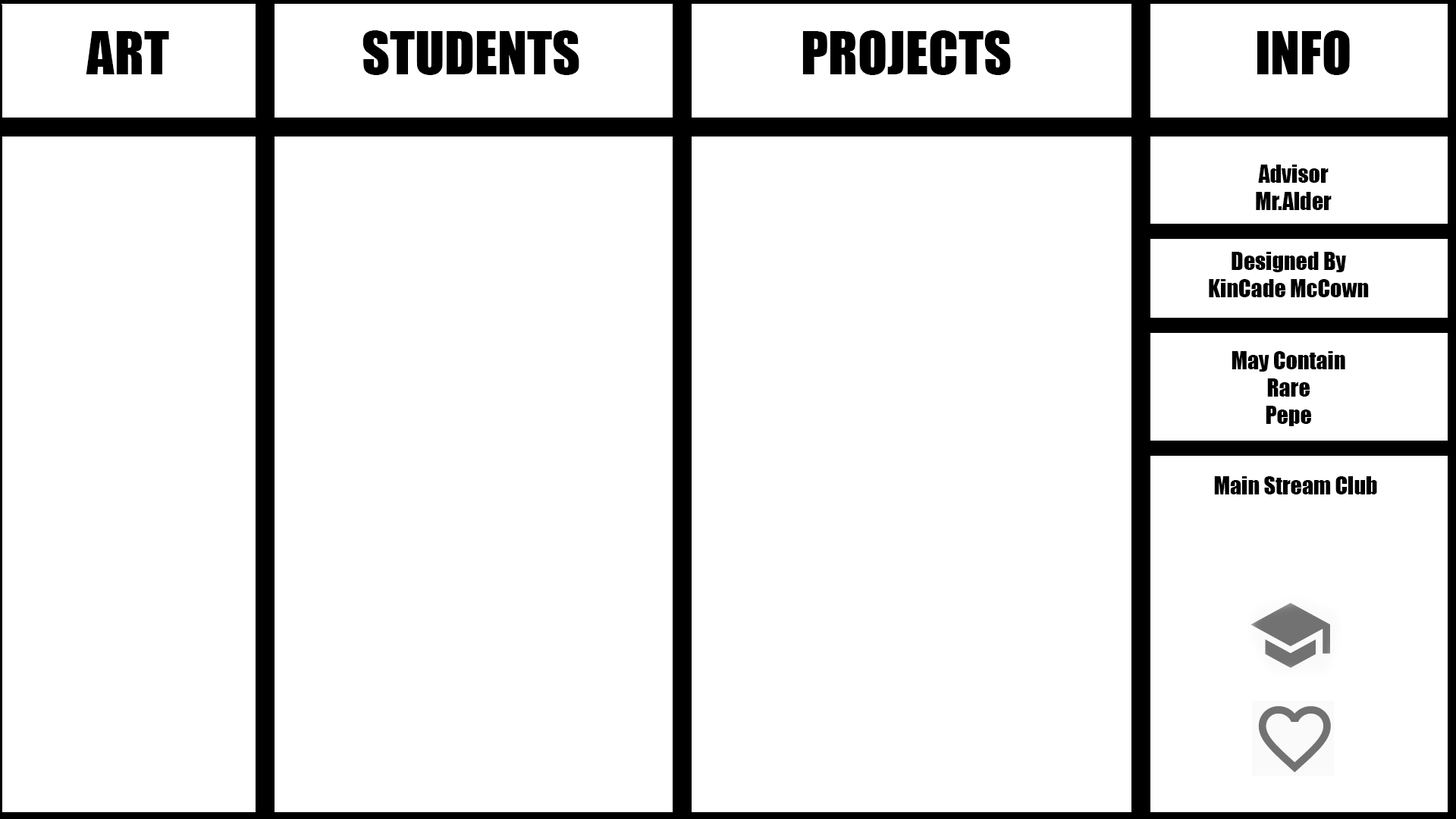
<style>
.page{position:relative;width:1456px;height:819px;background:#ffffff}
.page>*{position:absolute;margin:0}
.t1{font:54.6px "Impact";color:#000000}
.t2{font:22.7px "Impact";color:#000000}
</style>
<div class="page">
<p class="t1" style="left:86px;top:31px;width:83px;height:43px">ART</p>
<p class="t1" style="left:362px;top:30px;width:217px;height:45px">STUDENTS</p>
<p class="t1" style="left:802px;top:30px;width:209px;height:45px">PROJECTS</p>
<p class="t1" style="left:1257px;top:30px;width:93px;height:45px">INFO</p>
<p class="t2" style="left:1256px;top:165px;width:76px;height:45px;text-align:center">Advisor<br>Mr.Alder</p>
<p class="t2" style="left:1209px;top:252px;width:160px;height:45px;text-align:center">Designed By<br>KinCade McCown</p>
<p class="t2" style="left:1232px;top:351px;width:113px;height:75px;text-align:center">May Contain<br>Rare<br>Pepe</p>
<p class="t2" style="left:1214px;top:476px;width:163px;height:18px">Main Stream Club</p>
</div>
